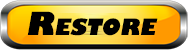
<style>
.page{position:relative;width:188px;height:50px}
.page>*{position:absolute;margin:0}
.t1{font:22px "GillSans-UltraBold";color:#000000;font-style:italic}
.t2{font:31.4px "GillSans-UltraBold";color:#000000;font-style:italic}
</style>
<div class="page">
<p class="t1" style="left:27px;top:11px;width:131px;height:25px"><span class="t2">R</span>ESTORE</p>
</div>
